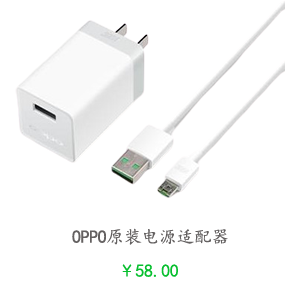
<style>
.page{position:relative;width:300px;height:300px;background:#ffffff}
.page>*{position:absolute;margin:0}
.t1{font:18px "KaiTi";letter-spacing:-0.025em;color:#646161}
.t2{font:18px "KaiTi";letter-spacing:-0.025em;color:#07bf2f}
</style>
<div class="page">
<p class="t1" style="left:72px;top:228px;width:156px;height:17px">OPPO原装电源适配器</p>
<p class="t2" style="left:122px;top:264px;width:56px;height:13px">￥58.00</p>
</div>
